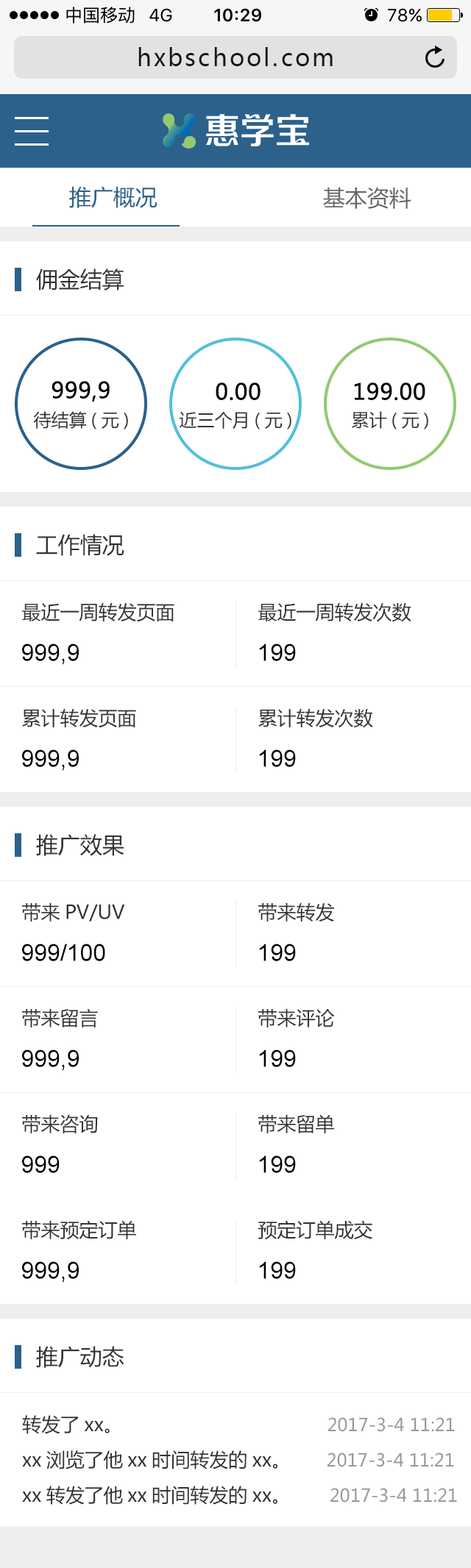
<style>
.page{position:relative;width:471px;height:1568px;background:#ffffff}
.page>*{position:absolute;margin:0}
.t1{font:23.5px "MicrosoftYaHei";letter-spacing:0.1em;color:#171717}
.t2{font:22.1px "MicrosoftYaHei";color:#2c618b}
.t3{font:22.1px "MicrosoftYaHei";color:#666666}
.t4{font:22.1px "MicrosoftYaHei";color:#333333}
.t5{font:22.1px "MicrosoftYaHei";color:#000000;font-weight:bold}
.t6{font:17.7px "MicrosoftYaHei";color:#333333}
.t7{font:19.1px "MicrosoftYaHei";color:#333333}
.t8{font:23.5px "ArialMT";color:#000000}
.t9{font:19.1px/35.3px "MicrosoftYaHei";color:#333333}
.t10{font:17.7px/35.3px "MicrosoftYaHei";color:#999999}
</style>
<div class="page">
<p class="t1" style="left:138px;top:47px;width:194px;height:19px">hxbschool.com</p>
<p class="t2" style="left:69px;top:186px;width:88px;height:22px">推广概况</p>
<p class="t3" style="left:323px;top:187px;width:88px;height:22px">基本资料</p>
<p class="t4" style="left:36px;top:268px;width:88px;height:23px">佣金结算</p>
<p class="t5" style="left:51px;top:381px;width:59px;height:21px">999,9</p>
<p class="t5" style="left:215px;top:382px;width:45px;height:19px">0.00</p>
<p class="t5" style="left:354px;top:382px;width:71px;height:19px">199.00</p>
<p class="t6" style="left:33px;top:411px;width:95px;height:19px">待结算(元)</p>
<p class="t6" style="left:179px;top:411px;width:112px;height:19px">近三个月(元)</p>
<p class="t6" style="left:352px;top:411px;width:76px;height:19px">累计(元)</p>
<p class="t4" style="left:36px;top:534px;width:88px;height:22px">工作情况</p>
<p class="t7" style="left:22px;top:602px;width:152px;height:20px">最近一周转发页面</p>
<p class="t7" style="left:258px;top:602px;width:153px;height:20px">最近一周转发次数</p>
<p class="t8" style="left:22px;top:644px;width:57px;height:21px">999,9</p>
<p class="t8" style="left:259px;top:644px;width:37px;height:17px">199</p>
<p class="t7" style="left:22px;top:708px;width:114px;height:20px">累计转发页面</p>
<p class="t7" style="left:258px;top:708px;width:115px;height:20px">累计转发次数</p>
<p class="t8" style="left:22px;top:749px;width:57px;height:22px">999,9</p>
<p class="t8" style="left:259px;top:749px;width:37px;height:18px">199</p>
<p class="t4" style="left:36px;top:834px;width:88px;height:22px">推广效果</p>
<p class="t7" style="left:22px;top:902px;width:103px;height:20px">带来PV/UV</p>
<p class="t7" style="left:258px;top:902px;width:76px;height:20px">带来转发</p>
<p class="t8" style="left:22px;top:944px;width:83px;height:17px">999/100</p>
<p class="t8" style="left:259px;top:944px;width:37px;height:17px">199</p>
<p class="t7" style="left:22px;top:1008px;width:76px;height:19px">带来留言</p>
<p class="t7" style="left:258px;top:1008px;width:77px;height:19px">带来评论</p>
<p class="t8" style="left:22px;top:1050px;width:57px;height:21px">999,9</p>
<p class="t8" style="left:259px;top:1050px;width:37px;height:17px">199</p>
<p class="t7" style="left:22px;top:1114px;width:76px;height:19px">带来咨询</p>
<p class="t7" style="left:258px;top:1114px;width:76px;height:19px">带来留单</p>
<p class="t8" style="left:22px;top:1155px;width:38px;height:18px">999</p>
<p class="t8" style="left:259px;top:1155px;width:37px;height:18px">199</p>
<p class="t7" style="left:22px;top:1220px;width:114px;height:20px">带来预定订单</p>
<p class="t7" style="left:258px;top:1220px;width:114px;height:20px">预定订单成交</p>
<p class="t8" style="left:22px;top:1261px;width:57px;height:22px">999,9</p>
<p class="t8" style="left:259px;top:1261px;width:37px;height:18px">199</p>
<p class="t4" style="left:36px;top:1346px;width:88px;height:22px">推广动态</p>
<p class="t9" style="left:22px;top:1415px;width:435px;height:90px">转发了xx。                                       <span class="t10">2017-3-4 11:21<br></span>xx浏览了他xx时间转发的xx。        <span class="t10">2017-3-4 11:21<br></span>xx转发了他xx时间转发的xx。         <span class="t10">2017-3-4 11:21</span></p>
</div>
